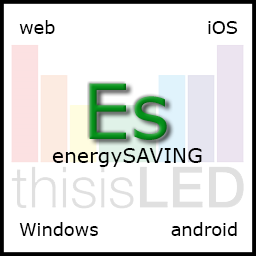
<style>
.page{position:relative;width:256px;height:256px;background:#ffffff}
.page>*{position:absolute;margin:0}
.t1{font:17.8px "Verdana";color:#000000}
.t2{font:76.2px "Verdana";color:#059119}
.t3{font:20.3px "Verdana";color:#000000}
</style>
<div class="page">
<p class="t1" style="left:19px;top:20px;width:36px;height:14px">web</p>
<p class="t1" style="left:208px;top:21px;width:30px;height:13px">iOS</p>
<p class="t2" style="left:89px;top:83px;width:78px;height:57px">Es</p>
<p class="t3" style="left:52px;top:148px;width:150px;height:19px">energySAVING</p>
<p class="t1" style="left:19px;top:222px;width:79px;height:14px">Windows</p>
<p class="t1" style="left:171px;top:222px;width:66px;height:14px">android</p>
</div>
